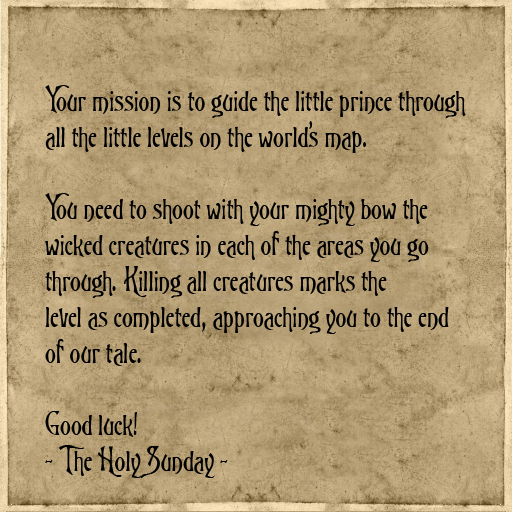
<style>
.page{position:relative;width:512px;height:512px}
.page>*{position:absolute;margin:0}
.t1{font:30px "TriniganFG";color:#000000}
</style>
<div class="page">
<p class="t1" style="left:45px;top:85px;width:421px;height:393px">Your mission is to guide the little prince through<br>all the little levels on the world’s map. <br><br>You need to shoot with your mighty bow the<br>wicked creatures in each of the areas you go<br>through. Killing all creatures marks the <br>level as completed, approaching you to the end <br>of our tale.<br><br>Good luck! <br>- The Holy Sunday -</p>
</div>
